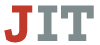
<style>
.page{position:relative;width:100px;height:45px;background:#ffffff}
.page>*{position:absolute;margin:0}
.t1{font:60px "Podkova-Bold";letter-spacing:0.02em;color:#7f8c8d;text-transform:uppercase}
.t2{font:60px "Podkova-Bold";letter-spacing:0.02em;color:#c0392b;text-transform:uppercase}
</style>
<div class="page">
<p class="t1" style="left:4px;top:5px;width:90px;height:38px"><span class="t2">j</span>it</p>
</div>
